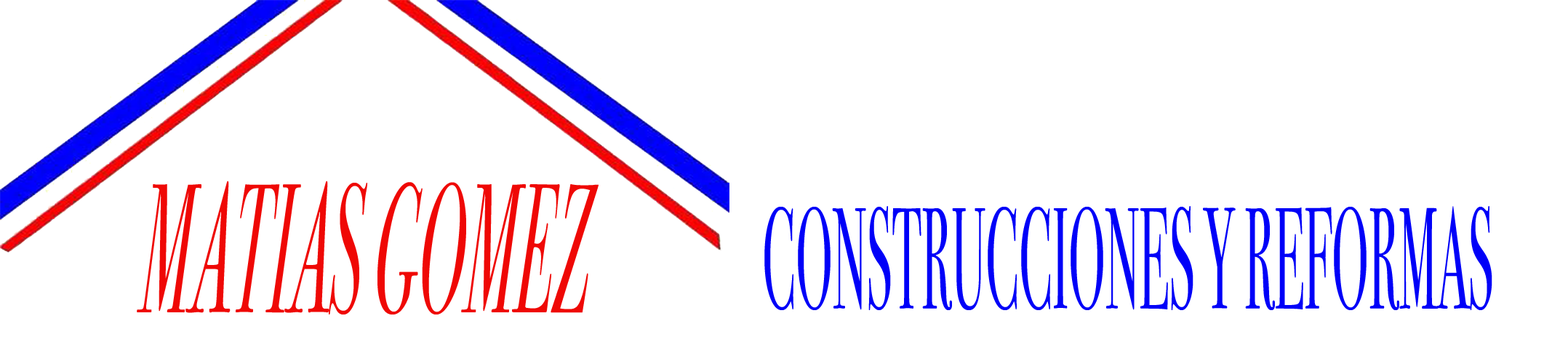
<style>
.page{position:relative;width:1568px;height:364px;background:#ffffff}
.page>*{position:absolute;margin:0}
.t1{font:184px "BodoniSvtyTwoITCTT-BookIta";color:#ef0805;scale:0.35 1}
.t2{font:144px "BodoniSvtyTwoITCTT-Book";color:#0000f8;scale:0.35 1}
</style>
<div class="page">
<p class="t1" style="left:137px;top:180px;width:462px;height:134px">MATIAS GOMEZ</p>
<p class="t2" style="left:764px;top:206px;width:728px;height:104px">CONSTRUCCIONES Y REFORMAS</p>
</div>
